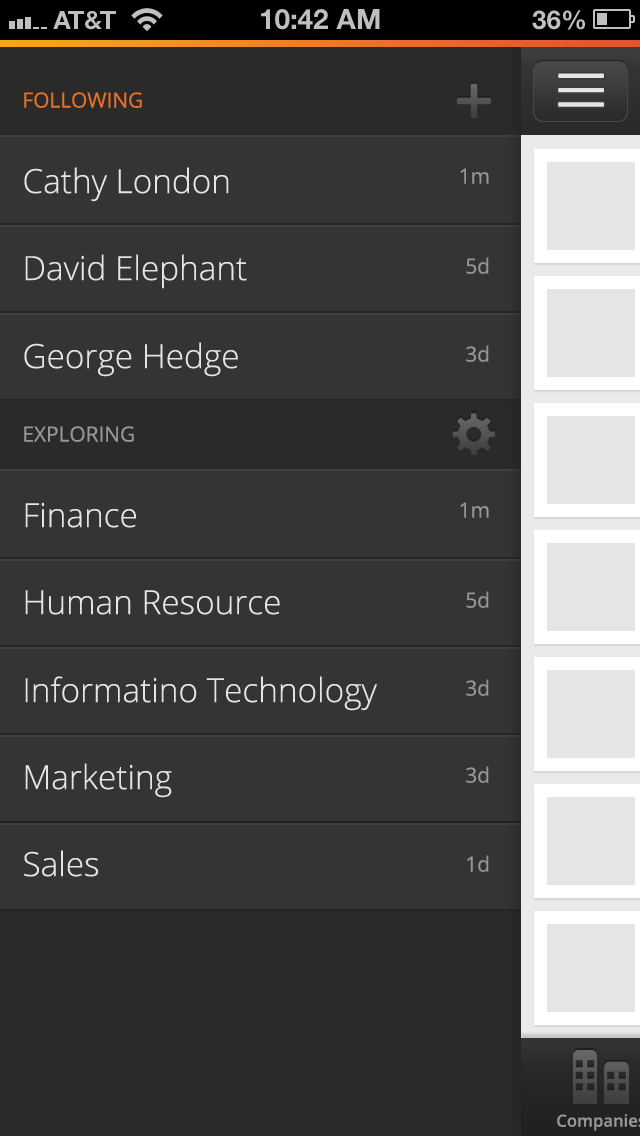
<style>
.page{position:relative;width:640px;height:1136px;background:#343434}
.page>*{position:absolute;margin:0}
.t1{font:20.8px "OpenSans";color:#e57128}
.t2{font:33.3px "OpenSans-Light";color:#e5e5e5}
.t3{font:20.8px "OpenSans";color:#969696}
</style>
<div class="page">
<p class="t1" style="left:24px;top:92px;width:118px;height:16px">FOLLOWING</p>
<p class="t2" style="left:24px;top:167px;width:205px;height:35px">Cathy London</p>
<p class="t3" style="left:460px;top:168px;width:29px;height:16px">1m</p>
<p class="t2" style="left:25px;top:254px;width:222px;height:35px">David Elephant</p>
<p class="t3" style="left:466px;top:257px;width:23px;height:17px">5d</p>
<p class="t2" style="left:24px;top:342px;width:214px;height:35px">George Hedge</p>
<p class="t3" style="left:466px;top:345px;width:23px;height:17px">3d</p>
<p class="t3" style="left:24px;top:426px;width:110px;height:16px">EXPLORING</p>
<p class="t2" style="left:25px;top:502px;width:111px;height:26px">Finance</p>
<p class="t3" style="left:460px;top:502px;width:29px;height:16px">1m</p>
<p class="t2" style="left:25px;top:590px;width:255px;height:25px">Human Resource</p>
<p class="t3" style="left:466px;top:591px;width:23px;height:17px">5d</p>
<p class="t2" style="left:25px;top:676px;width:352px;height:35px">Informatino Technology</p>
<p class="t3" style="left:466px;top:679px;width:23px;height:17px">3d</p>
<p class="t2" style="left:25px;top:763px;width:147px;height:35px">Marketing</p>
<p class="t3" style="left:466px;top:766px;width:23px;height:17px">3d</p>
<p class="t2" style="left:24px;top:850px;width:75px;height:27px">Sales</p>
<p class="t3" style="left:467px;top:855px;width:22px;height:17px">1d</p>
</div>
